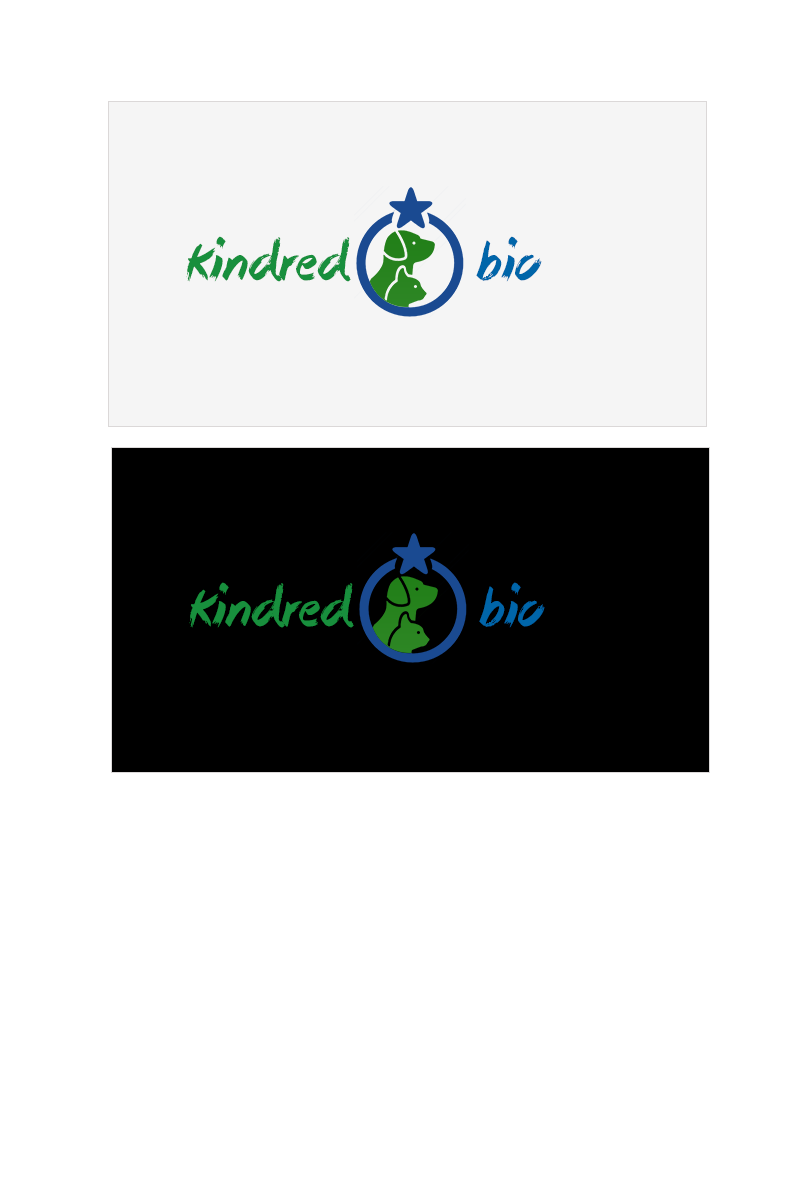
<style>
.page{position:relative;width:800px;height:1200px;background:#ffffff}
.page>*{position:absolute;margin:0}
.t1{font:72px "StickyThings";color:#188f3d}
.t2{font:72px "StickyThings";color:#0065a9}
</style>
<div class="page">
<p class="t1" style="left:186px;top:236px;width:356px;height:46px">Kindred       <span class="t2">Bio</span></p>
<p class="t1" style="left:189px;top:582px;width:356px;height:46px">Kindred       <span class="t2">Bio</span></p>
</div>
